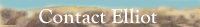
<style>
.page{position:relative;width:200px;height:27px}
.page>*{position:absolute;margin:0}
.t1{font:20.8px "GoudyOldStyleT-Bold";color:#fcf9f9}
</style>
<div class="page">
<p class="t1" style="left:39px;top:8px;width:118px;height:16px">Contact Elliot</p>
</div>
